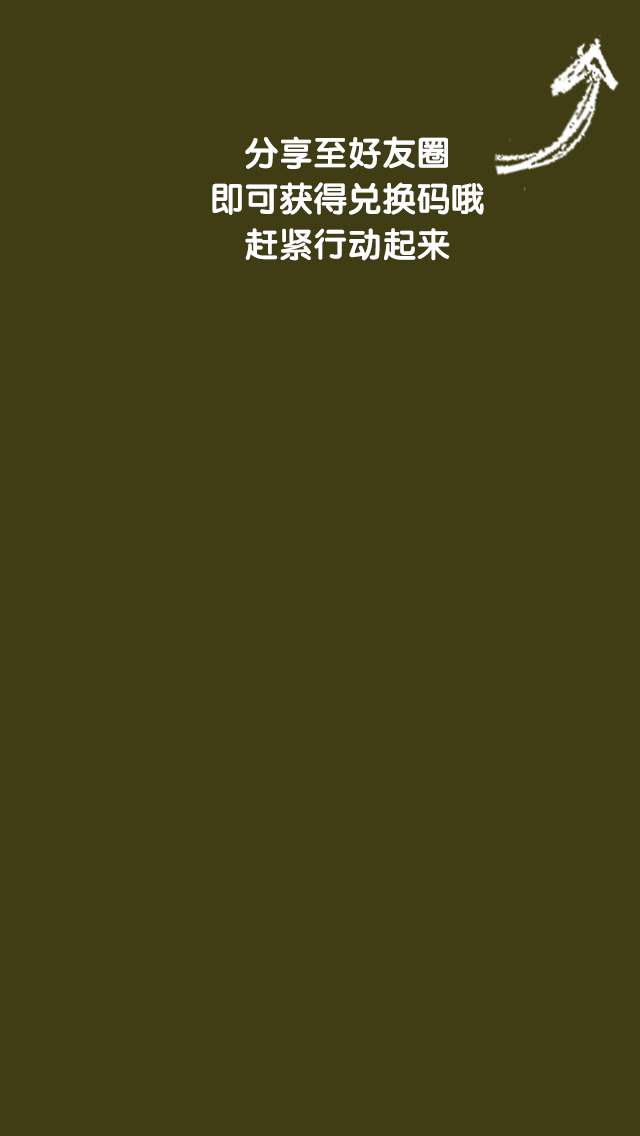
<style>
.page{position:relative;width:640px;height:1136px;background:#403c14}
.page>*{position:absolute;margin:0}
.t1{font:34.3px/45.7px "FZY4JW--GB1-0";color:#ffffff}
</style>
<div class="page">
<p class="t1" style="left:212px;top:136px;width:272px;height:125px;text-align:center">分享至好友圈<br>即可获得兑换码哦<br>赶紧行动起来</p>
</div>
